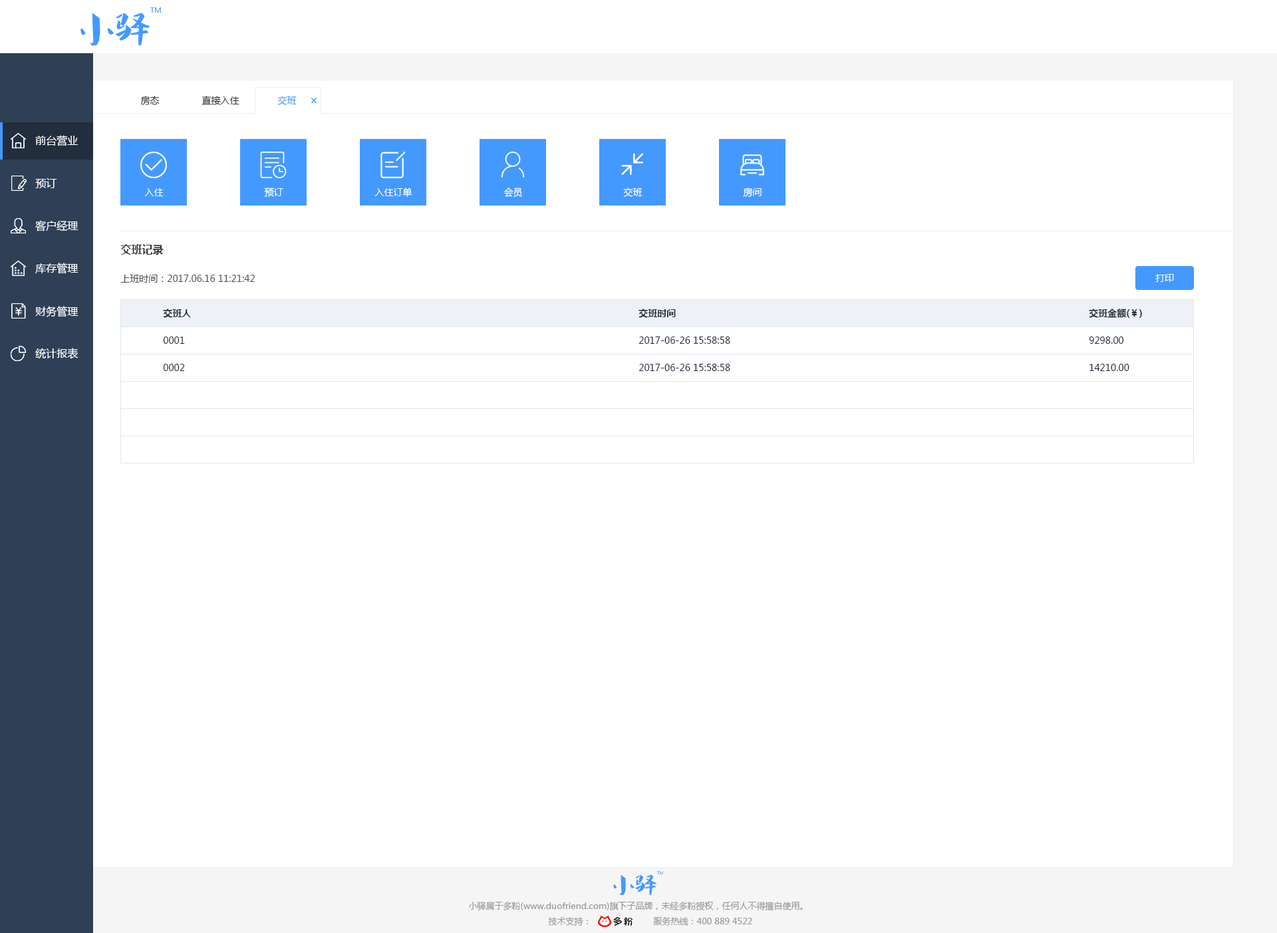
<style>
.page{position:relative;width:1277px;height:933px;background:#ffffff}
.page>*{position:absolute;margin:0}
.t1{font:9.3px "MicrosoftYaHei";color:#333333}
.t2{font:9.3px "MicrosoftYaHei";color:#4499ff}
.t3{font:10.6px "MicrosoftYaHei";color:#ffffff}
.t4{font:9.3px "MicrosoftYaHei";color:#ffffff}
.t5{font:10.6px "MicrosoftYaHei-Bold";color:#333333}
.t6{font:9.3px "MicrosoftYaHei";color:#505050}
.t7{font:9.3px "MicrosoftYaHei-Bold";color:#1f2d3d}
.t8{font:9.3px "MicrosoftYaHei";color:#1f2d3d}
.t9{font:8.6px "MicrosoftYaHei";color:#999999}
</style>
<div class="page">
<p class="t1" style="left:140px;top:96px;width:20px;height:9px">房态</p>
<p class="t1" style="left:202px;top:96px;width:38px;height:9px">直接入住</p>
<p class="t2" style="left:277px;top:96px;width:20px;height:9px">交班</p>
<p class="t3" style="left:35px;top:135px;width:44px;height:11px">前台营业</p>
<p class="t3" style="left:35px;top:178px;width:22px;height:10px">预订</p>
<p class="t4" style="left:144px;top:188px;width:20px;height:8px">入住</p>
<p class="t4" style="left:264px;top:188px;width:19px;height:9px">预订</p>
<p class="t4" style="left:375px;top:188px;width:38px;height:9px">入住订单</p>
<p class="t4" style="left:504px;top:188px;width:18px;height:10px">会员</p>
<p class="t4" style="left:623px;top:188px;width:20px;height:9px">交班</p>
<p class="t4" style="left:743px;top:188px;width:19px;height:9px">房间</p>
<p class="t3" style="left:35px;top:220px;width:44px;height:12px">客户经理</p>
<p class="t5" style="left:120px;top:244px;width:44px;height:11px">交班记录</p>
<p class="t3" style="left:35px;top:263px;width:44px;height:11px">库存管理</p>
<p class="t6" style="left:120px;top:275px;width:135px;height:8px">上班时间：2017.06.16 11:21:42</p>
<p class="t4" style="left:1156px;top:274px;width:18px;height:8px">打印</p>
<p class="t3" style="left:35px;top:306px;width:44px;height:11px">财务管理</p>
<p class="t7" style="left:163px;top:309px;width:28px;height:9px">交班人</p>
<p class="t7" style="left:639px;top:309px;width:37px;height:9px">交班时间</p>
<p class="t7" style="left:1089px;top:309px;width:53px;height:9px">交班金额(￥)</p>
<p class="t8" style="left:163px;top:337px;width:22px;height:7px">0001</p>
<p class="t8" style="left:639px;top:337px;width:92px;height:7px">2017-06-26 15:58:58</p>
<p class="t8" style="left:1089px;top:337px;width:35px;height:7px">9298.00</p>
<p class="t3" style="left:35px;top:348px;width:44px;height:11px">统计报表</p>
<p class="t8" style="left:163px;top:364px;width:22px;height:7px">0002</p>
<p class="t8" style="left:639px;top:364px;width:92px;height:7px">2017-06-26 15:58:58</p>
<p class="t8" style="left:1090px;top:364px;width:40px;height:7px">14210.00</p>
<p class="t9" style="left:468px;top:902px;width:335px;height:9px">小驿属于多粉(www.duofriend.com)旗下子品牌，未经多粉授权，任何人不得擅自使用。</p>
<p class="t9" style="left:548px;top:917px;width:40px;height:9px">技术支持：</p>
<p class="t9" style="left:653px;top:917px;width:99px;height:9px">服务热线：400 889 4522</p>
</div>
